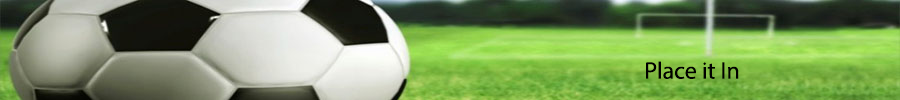
<style>
.page{position:relative;width:900px;height:100px}
.page>*{position:absolute;margin:0}
.t1{font:24px "MyriadPro-Regular";color:#000000}
</style>
<div class="page">
<p class="t1" style="left:646px;top:61px;width:93px;height:18px">Place it In</p>
</div>
